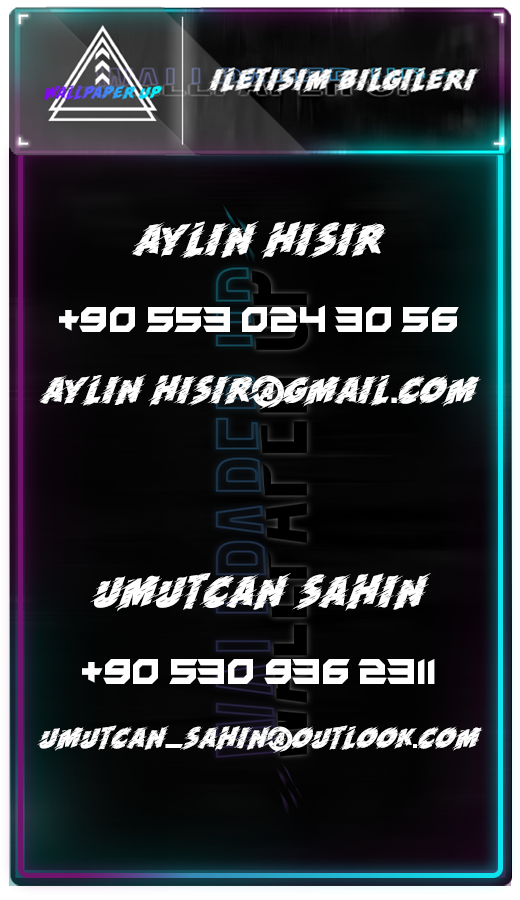
<style>
.page{position:relative;width:520px;height:900px}
.page>*{position:absolute;margin:0}
.t1{font:32px "VerminVibesV";letter-spacing:0.02em;color:#fefefe}
.t2{font:32px "Run!";letter-spacing:0.02em;color:#fefefe}
.t3{font:27px "Run!";letter-spacing:0.02em;color:#fefefe}
.t4{font:27px "VerminVibesV";letter-spacing:0.02em;color:#fefefe}
.t5{font:21px "Run!";letter-spacing:0.02em;color:#fefefe}
.t6{font:21px "VerminVibesV";letter-spacing:0.02em;color:#fefefe}
</style>
<div class="page">
<p class="t1" style="left:39px;top:221px;width:442px;height:189px;text-align:center"><span class="t2">aylin hisir<br><br></span>+90 553 024 30 56<br><br><span class="t3">aylin.hisir@gmail</span><span class="t4">.</span><span class="t3">com</span></p>
<p class="t1" style="left:37px;top:572px;width:446px;height:181px;text-align:center"><span class="t2">umutcan sahin<br><br></span>+90 530 936 2311<br><br><span class="t5">umutcan</span><span class="t6">_</span><span class="t5">sahin@outlook</span><span class="t6">.</span><span class="t5">com</span></p>
</div>
